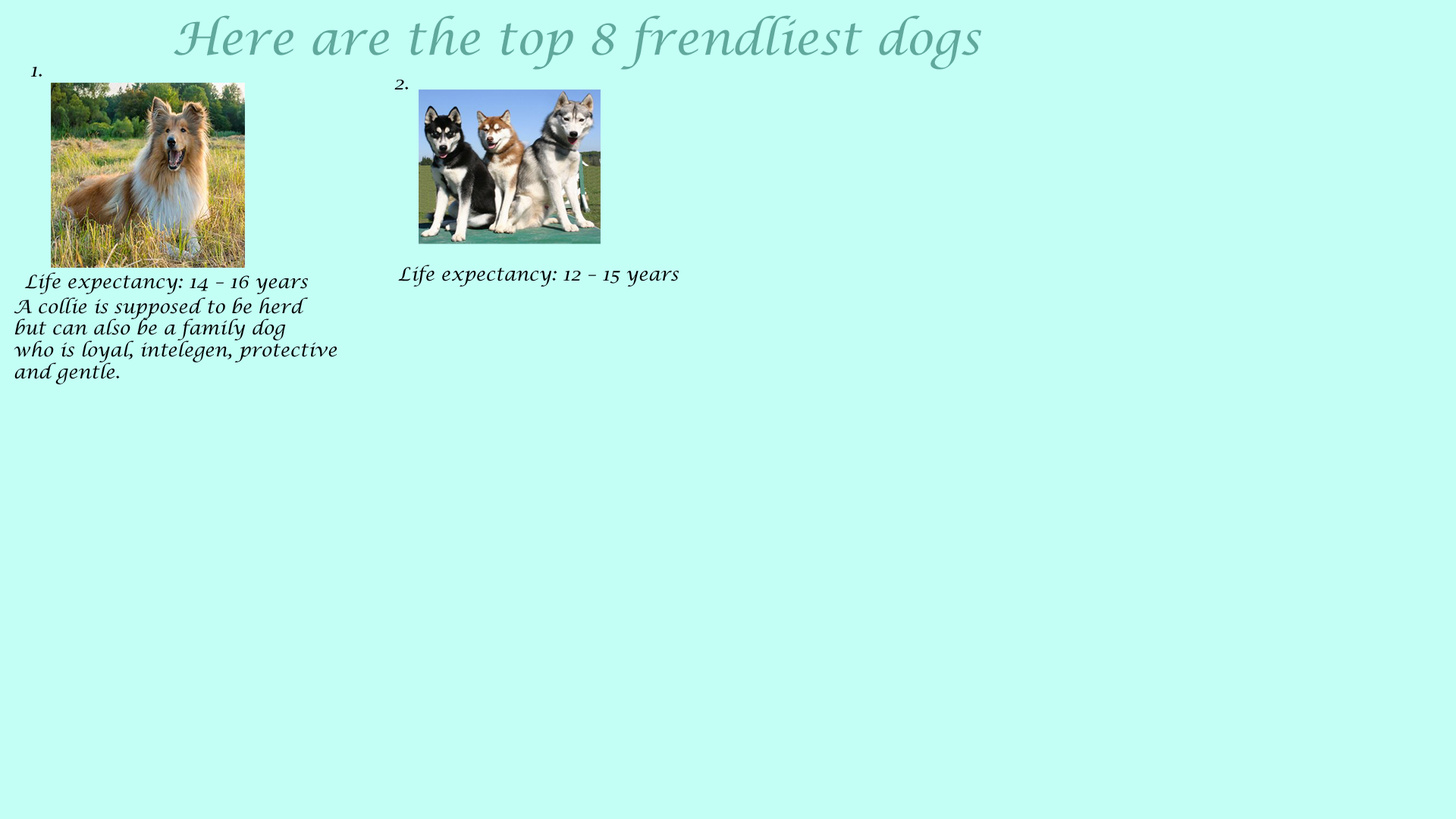
<style>
.page{position:relative;width:1456px;height:819px;background:#c3fff5}
.page>*{position:absolute;margin:0}
.t1{font:45.5px "LucidaCalligraphy-Italic";color:#60a89c}
.t2{font:18.2px "LucidaCalligraphy-Italic";color:#000000}
</style>
<div class="page">
<p class="t1" style="left:174px;top:15px;width:807px;height:55px">Here are the top 8 frendliest dogs</p>
<p class="t2" style="left:30px;top:67px;width:12px;height:10px">1.</p>
<p class="t2" style="left:394px;top:80px;width:15px;height:10px">2.</p>
<p class="t2" style="left:398px;top:265px;width:281px;height:22px">Life expectancy: 12 – 15 years</p>
<p class="t2" style="left:24px;top:272px;width:284px;height:22px">Life expectancy: 14 – 16 years</p>
<p class="t2" style="left:14px;top:297px;width:323px;height:87px">A collie is supposed to be herd <br>but can also be a family dog <br>who is loyal, intelegen, protective <br>and gentle.</p>
</div>
